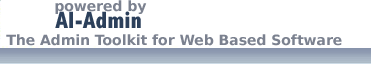
<style>
.page{position:relative;width:371px;height:64px;background:#ffffff}
.page>*{position:absolute;margin:0}
.t1{font:13.9px "BitstreamVeraSans-Bold";color:#7b818f}
.t2{font:23.9px "AbadiMT-CondensedExtraBold";color:#2c405b}
</style>
<div class="page">
<p class="t1" style="left:55px;top:0px;width:92px;height:14px">powered by</p>
<p class="t2" style="left:55px;top:11px;width:86px;height:18px">Al-Admin</p>
<p class="t1" style="left:6px;top:34px;width:336px;height:12px">The Admin Toolkit for Web Based Software</p>
</div>
